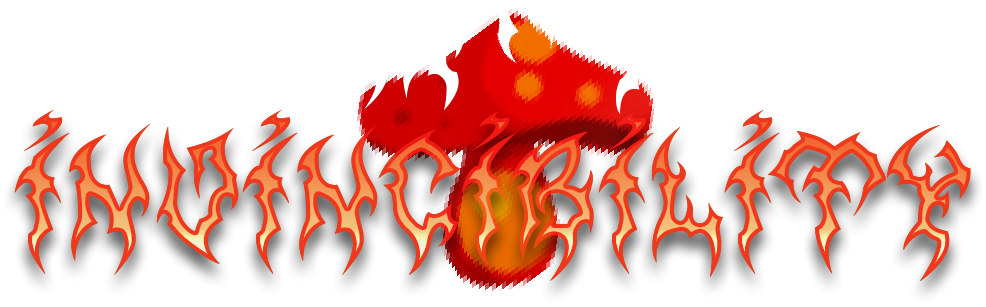
<style>
.page{position:relative;width:986px;height:307px;background:#ffffff}
.page>*{position:absolute;margin:0}
.t1{font:172.5px "MBForeverRaw"}
</style>
<div class="page">
<p class="t1" style="left:14px;top:110px;width:957px;height:171px">INVINCiBILITY</p>
</div>
